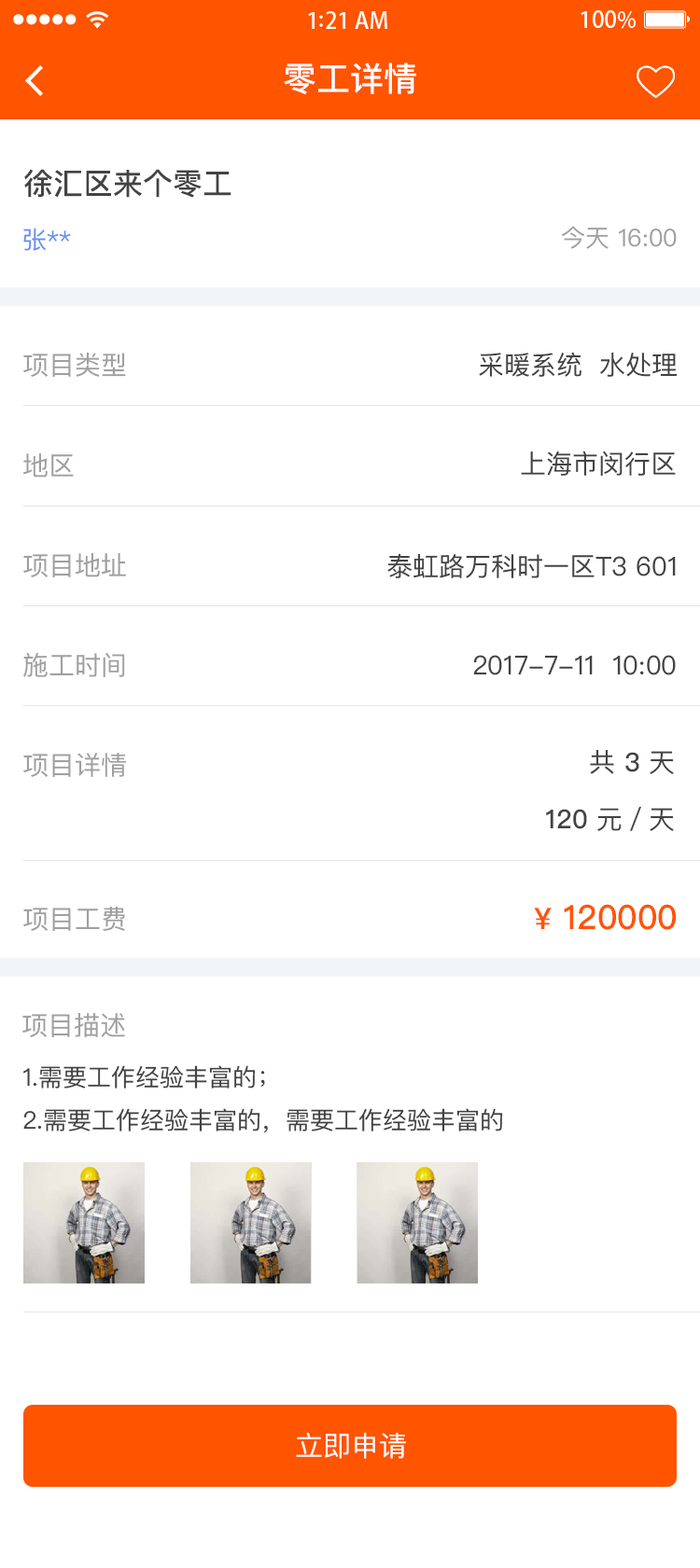
<style>
.page{position:relative;width:700px;height:1568px;background:#ffffff}
.page>*{position:absolute;margin:0}
.t1{font:33.6px "PingFangSC-Medium";color:#ffffff}
.t2{font:29.8px "PingFangSC-Medium";color:#434343}
.t3{font:24.3px "PingFangSC-Regular";color:#648df6}
.t4{font:24.3px "PingFangSC-Regular";color:#a0a0a0}
.t5{font:26.1px "PingFangSC-Regular";color:#a0a0a0}
.t6{font:26.1px "PingFangSC-Regular";color:#434343}
.t7{font:26.1px/60.6px "PingFangSC-Medium";color:#434343}
.t8{font:26.1px/60.6px "PingFangSC-Regular";color:#434343}
.t9{font:33.6px "PingFangSC-Medium";color:#ff5400}
.t10{font:29.8px "PingFangSC-Medium";color:#ff5400}
.t11{font:24.3px/46.6px "PingFangSC-Regular";color:#434343}
.t12{font:28px "PingFangSC-Regular";color:#ffffff;text-transform:uppercase}
</style>
<div class="page">
<p class="t1" style="left:284px;top:62px;width:132px;height:33px">零工详情</p>
<p class="t2" style="left:24px;top:169px;width:207px;height:29px">徐汇区来个零工</p>
<p class="t3" style="left:23px;top:228px;width:48px;height:23px">张**</p>
<p class="t4" style="left:562px;top:226px;width:114px;height:23px">今天 16:00</p>
<p class="t5" style="left:23px;top:353px;width:103px;height:24px">项目类型</p>
<p class="t6" style="left:479px;top:352px;width:197px;height:25px">采暖系统  水处理</p>
<p class="t5" style="left:23px;top:453px;width:51px;height:25px">地区</p>
<p class="t6" style="left:520px;top:451px;width:155px;height:25px">上海市闵行区</p>
<p class="t5" style="left:23px;top:553px;width:103px;height:24px">项目地址</p>
<p class="t6" style="left:387px;top:553px;width:288px;height:25px">泰虹路万科时一区T3 601</p>
<p class="t5" style="left:23px;top:652px;width:102px;height:25px">施工时间</p>
<p class="t6" style="left:473px;top:655px;width:202px;height:20px">2017-7-11  10:00</p>
<p class="t7" style="left:546px;top:749px;width:127px;height:82px;text-align:right"><span class="t8">共 </span>3<span class="t8"> 天<br></span>120<span class="t8"> 元／天</span></p>
<p class="t5" style="left:23px;top:753px;width:103px;height:24px">项目详情</p>
<p class="t9" style="left:534px;top:904px;width:141px;height:26px"><span class="t10">¥</span> 120000</p>
<p class="t5" style="left:23px;top:907px;width:102px;height:24px">项目工费</p>
<p class="t5" style="left:22px;top:1013px;width:103px;height:24px">项目描述</p>
<p class="t11" style="left:23px;top:1065px;width:480px;height:68px">1.需要工作经验丰富的；<br>2.需要工作经验丰富的，需要工作经验丰富的</p>
<p class="t12" style="left:296px;top:1433px;width:110px;height:26px">立即申请</p>
</div>
